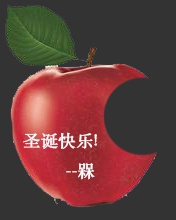
<style>
.page{position:relative;width:176px;height:220px;background:#333333}
.page>*{position:absolute;margin:0}
.t1{font:17.1px "STSongti-SC-Regular";color:#ffffff;font-weight:bold}
</style>
<div class="page">
<p class="t1" style="left:23px;top:132px;width:74px;height:48px">圣诞快乐!<br>         --槑</p>
</div>
